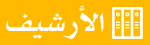
<style>
.page{position:relative;width:150px;height:45px;background:#ffba00}
.page>*{position:absolute;margin:0}
.t1{font:38px "Harf-Fannan";color:#ffffff}
</style>
<div class="page">
<p class="t1" style="left:6px;top:6px;width:98px;height:33px">الأرشيف</p>
</div>
